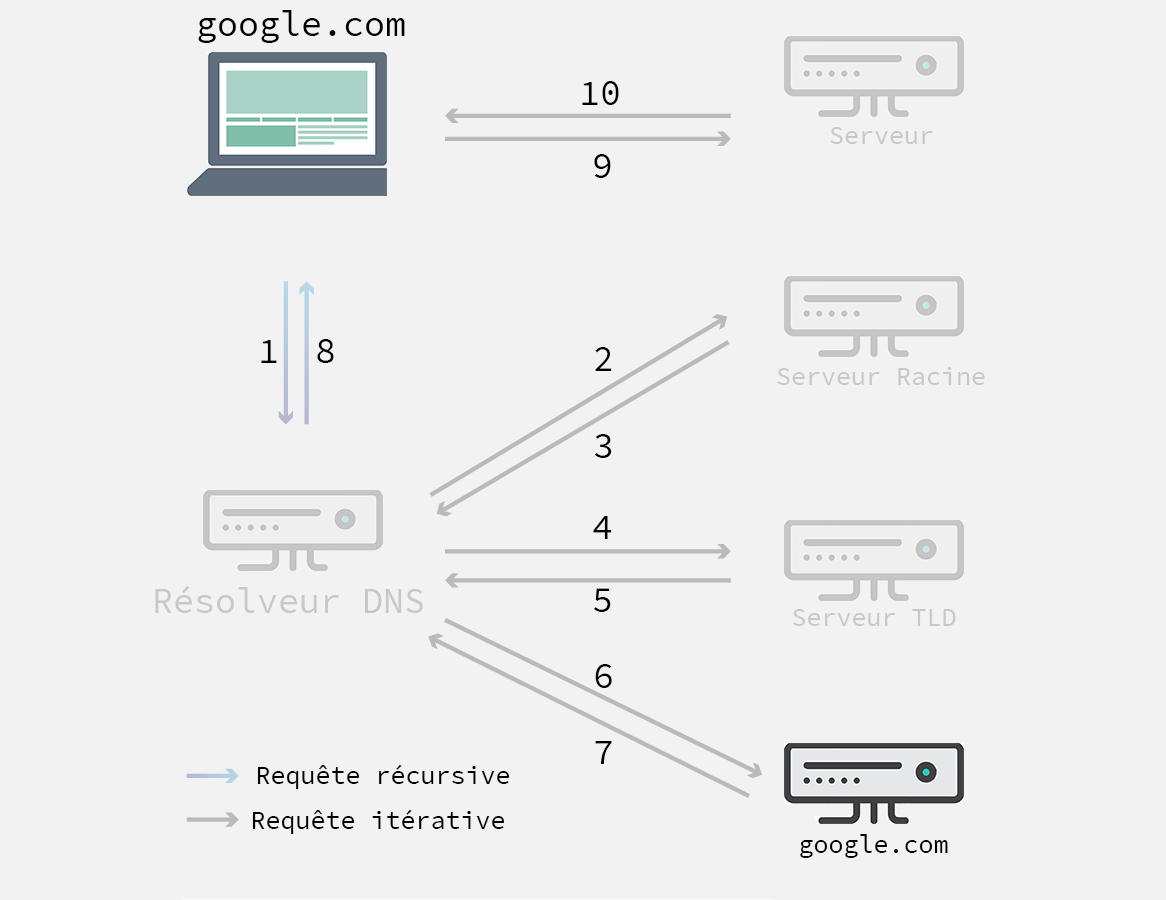
<style>
.page{position:relative;width:1166px;height:900px;background:#f2f2f2}
.page>*{position:absolute;margin:0}
.t1{font:35px "SourceCodePro-Regular";color:#000000}
.t2{font:25px "SourceCodePro-Regular";color:#c8c8c8}
.t3{font:35px "SourceCodePro-Regular";color:#c8c8c8}
.t4{font:25px "SourceCodePro-Regular";color:#000000}
</style>
<div class="page">
<p class="t1" style="left:198px;top:10px;width:207px;height:33px">google.com</p>
<p class="t1" style="left:582px;top:81px;width:37px;height:24px">10</p>
<p class="t2" style="left:830px;top:127px;width:103px;height:17px">Serveur</p>
<p class="t1" style="left:594px;top:154px;width:17px;height:24px">9</p>
<p class="t1" style="left:261px;top:340px;width:16px;height:23px">1</p>
<p class="t1" style="left:317px;top:339px;width:17px;height:24px">8</p>
<p class="t1" style="left:595px;top:347px;width:17px;height:24px">2</p>
<p class="t2" style="left:777px;top:367px;width:208px;height:18px">Serveur Racine</p>
<p class="t1" style="left:595px;top:434px;width:17px;height:24px">3</p>
<p class="t1" style="left:593px;top:516px;width:19px;height:23px">4</p>
<p class="t3" style="left:155px;top:586px;width:268px;height:27px">Résolveur DNS</p>
<p class="t1" style="left:594px;top:588px;width:17px;height:24px">5</p>
<p class="t2" style="left:793px;top:609px;width:163px;height:17px">Serveur TLD</p>
<p class="t1" style="left:595px;top:664px;width:17px;height:24px">6</p>
<p class="t1" style="left:595px;top:741px;width:17px;height:23px">7</p>
<p class="t4" style="left:257px;top:764px;width:253px;height:25px">Requête récursive</p>
<p class="t4" style="left:252px;top:809px;width:253px;height:25px">Requête itérative</p>
<p class="t4" style="left:800px;top:834px;width:148px;height:24px">google.com</p>
</div>
